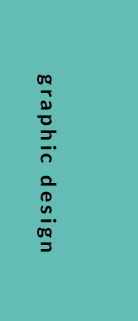
<style>
.page{position:relative;width:138px;height:321px;background:#64bdb5}
.page>*{position:absolute;margin:0}
.t1{font:21px "Lato-Heavy";letter-spacing:0.16em;color:#000000}
</style>
<div class="page">
<p class="t1" style="left:37px;top:74px;width:20px;height:178px;rotate:90deg">graphic design</p>
</div>
